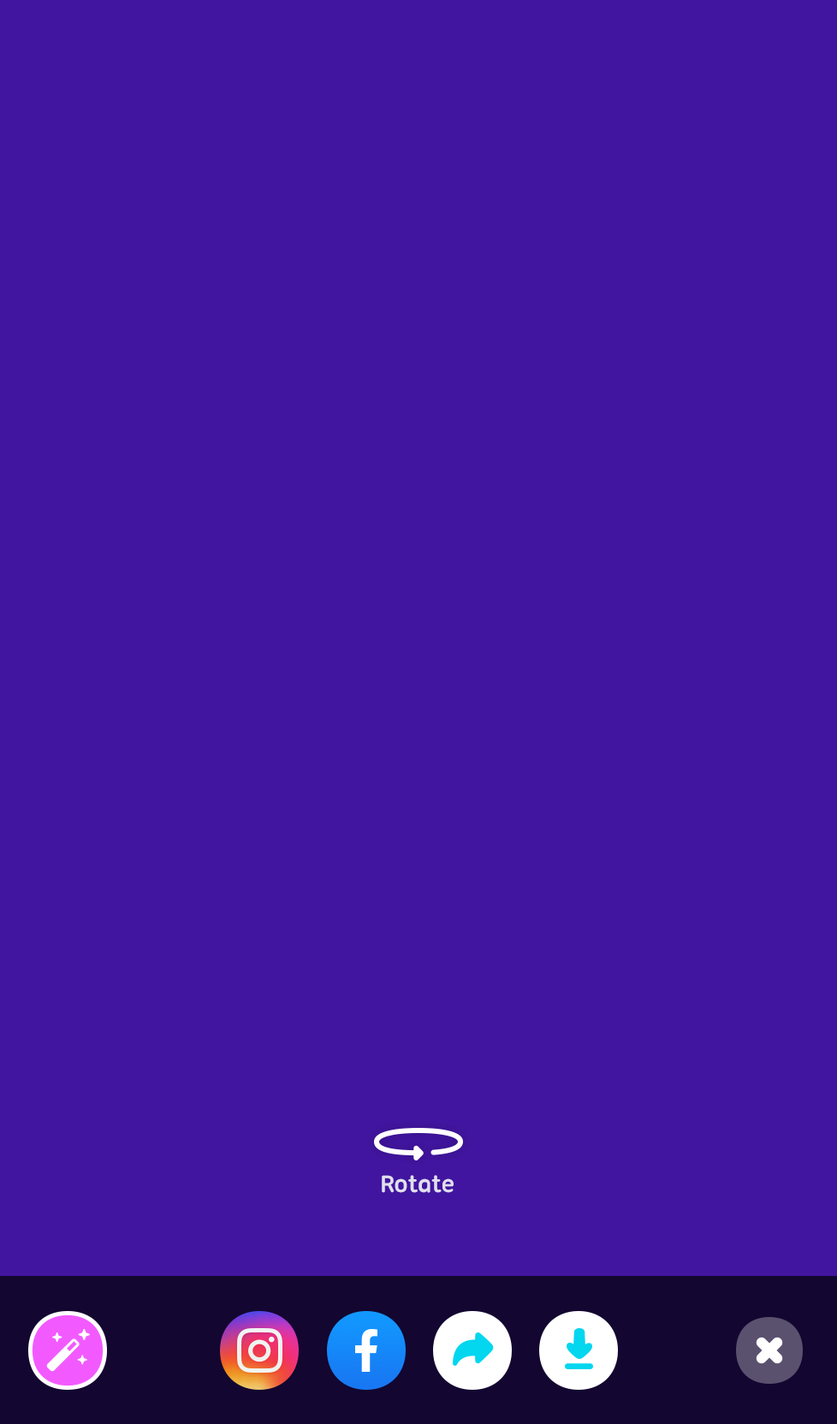
<style>
.page{position:relative;width:837px;height:1424px;background:#4115a0}
.page>*{position:absolute;margin:0}
.t1{font:25.7px "UbuntuTitling-Bold";letter-spacing:-0.025em;color:#e2deee}
</style>
<div class="page">
<p class="t1" style="left:382px;top:1175px;width:72px;height:18px">Rotate</p>
</div>
